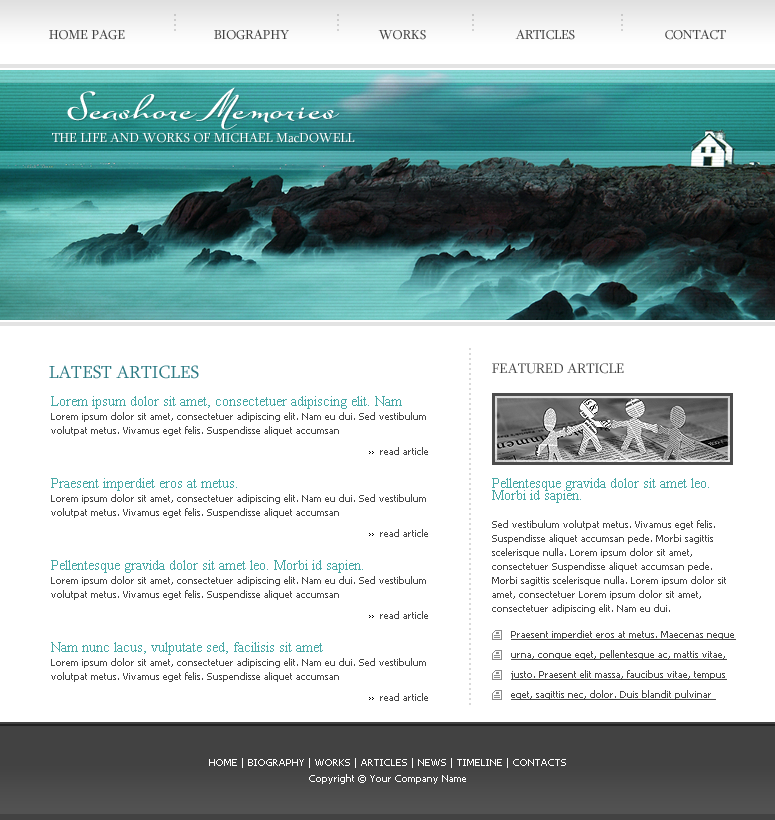
<style>
.page{position:relative;width:775px;height:820px;background:#ffffff}
.page>*{position:absolute;margin:0}
.t1{font:18.8px "Sylfaen";color:#cdcdcd}
.t2{font:13.2px "Sylfaen";color:#414141}
.t3{font:37.2px "SuaveScriptAlt-Bold";color:#ffffff}
.t4{font:13.2px "Sylfaen";color:#ffffff}
.t5{font:18.8px "Sylfaen";color:#d9d9d9}
.t6{font:18px "Sylfaen";color:#2d7b85}
.t7{font:14px "Sylfaen";color:#424242;text-transform:uppercase}
.t8{font:10px/14px "Tahoma";color:#484848}
.t9{font:14px/12px "TimesNewRomanPSMT";color:#47a8a6}
.t10{font:10px "Tahoma";color:#484848}
.t11{font:10px/20px "Tahoma";color:#484848;text-decoration:underline}
.t12{font:10px/16px "Tahoma";color:#ffffff}
</style>
<div class="page">
<p class="t1" style="left:174px;top:14px;width:2px;height:17px;rotate:90deg">....</p>
<p class="t1" style="left:337px;top:14px;width:2px;height:17px;rotate:90deg">....</p>
<p class="t1" style="left:472px;top:14px;width:2px;height:17px;rotate:90deg">....</p>
<p class="t1" style="left:621px;top:14px;width:2px;height:17px;rotate:90deg">....</p>
<p class="t2" style="left:49px;top:29px;width:76px;height:11px">HOME PAGE</p>
<p class="t2" style="left:214px;top:29px;width:75px;height:11px">BIOGRAPHY</p>
<p class="t2" style="left:378px;top:30px;width:48px;height:10px">WORKS</p>
<p class="t2" style="left:515px;top:29px;width:60px;height:11px">ARTICLES</p>
<p class="t2" style="left:665px;top:29px;width:61px;height:11px">CONTACT</p>
<p class="t3" style="left:67px;top:87px;width:273px;height:43px">Seashore Memories</p>
<p class="t4" style="left:52px;top:132px;width:303px;height:11px">THE LIFE AND WORKS OF MICHAEL MacDOWELL</p>
<p class="t5" style="left:469px;top:348px;width:2px;height:357px;rotate:90deg">........................................................................</p>
<p class="t6" style="left:49px;top:365px;width:150px;height:14px">LATEST ARTICLES</p>
<p class="t7" style="left:492px;top:363px;width:132px;height:11px">FEATURED ARTICLE</p>
<p class="t8" style="left:51px;top:396px;width:375px;height:40px"><span class="t9">Lorem ipsum dolor sit amet, consectetuer adipiscing elit. Nam<br></span>Lorem ipsum dolor sit amet, consectetuer adipiscing elit. Nam eu dui. Sed vestibulum volutpat metus. Vivamus eget felis. Suspendisse aliquet accumsan</p>
<p class="t10" style="left:380px;top:447px;width:48px;height:8px">read article</p>
<p class="t8" style="left:51px;top:478px;width:375px;height:40px"><span class="t9">Praesent imperdiet eros at metus.<br></span>Lorem ipsum dolor sit amet, consectetuer adipiscing elit. Nam eu dui. Sed vestibulum volutpat metus. Vivamus eget felis. Suspendisse aliquet accumsan</p>
<p class="t8" style="left:492px;top:478px;width:234px;height:136px"><span class="t9">Pellentesque gravida dolor sit amet leo. Morbi id sapien. <br></span><br>Sed vestibulum volutpat metus. Vivamus eget felis. Suspendisse aliquet accumsan pede. Morbi sagittis scelerisque nulla. Lorem ipsum dolor sit amet, consectetuer Suspendisse aliquet accumsan pede. Morbi sagittis scelerisque nulla. Lorem ipsum dolor sit amet, consectetuer Lorem ipsum dolor sit amet, consectetuer adipiscing elit. Nam eu dui.</p>
<p class="t10" style="left:380px;top:529px;width:48px;height:8px">read article</p>
<p class="t8" style="left:51px;top:560px;width:375px;height:40px"><span class="t9">Pellentesque gravida dolor sit amet leo. Morbi id sapien. <br></span>Lorem ipsum dolor sit amet, consectetuer adipiscing elit. Nam eu dui. Sed vestibulum volutpat metus. Vivamus eget felis. Suspendisse aliquet accumsan</p>
<p class="t10" style="left:380px;top:611px;width:48px;height:8px">read article</p>
<p class="t11" style="left:511px;top:630px;width:225px;height:70px">Praesent imperdiet eros at metus. Maecenas neque urna, congue eget, pellentesque ac, mattis vitae, justo. Praesent elit massa, faucibus vitae, tempus eget, sagittis nec, dolor. Duis blandit pulvinar</p>
<p class="t8" style="left:51px;top:642px;width:375px;height:40px"><span class="t9">Nam nunc lacus, vulputate sed, facilisis sit amet<br></span>Lorem ipsum dolor sit amet, consectetuer adipiscing elit. Nam eu dui. Sed vestibulum volutpat metus. Vivamus eget felis. Suspendisse aliquet accumsan</p>
<p class="t10" style="left:380px;top:693px;width:48px;height:8px">read article</p>
<p class="t12" style="left:209px;top:758px;width:357px;height:26px;text-align:center">HOME | BIOGRAPHY | WORKS | ARTICLES | NEWS | TIMELINE | CONTACTS<br>Copyright © Your Company Name</p>
</div>
